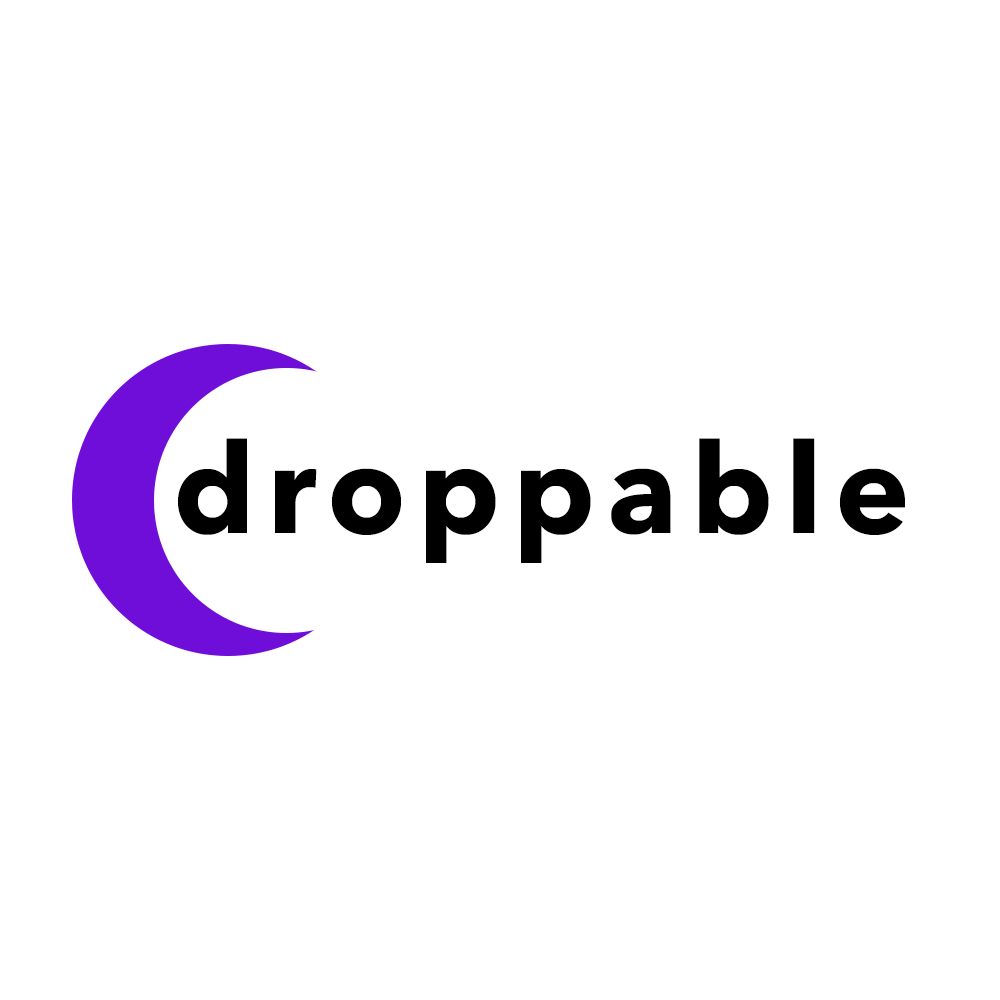
<style>
.page{position:relative;width:1000px;height:1000px;background:#ffffff}
.page>*{position:absolute;margin:0}
.t1{font:125px "AvenirNext-Bold";letter-spacing:0.1em;color:#000000}
</style>
<div class="page">
<p class="t1" style="left:178px;top:438px;width:727px;height:125px">droppable</p>
</div>
